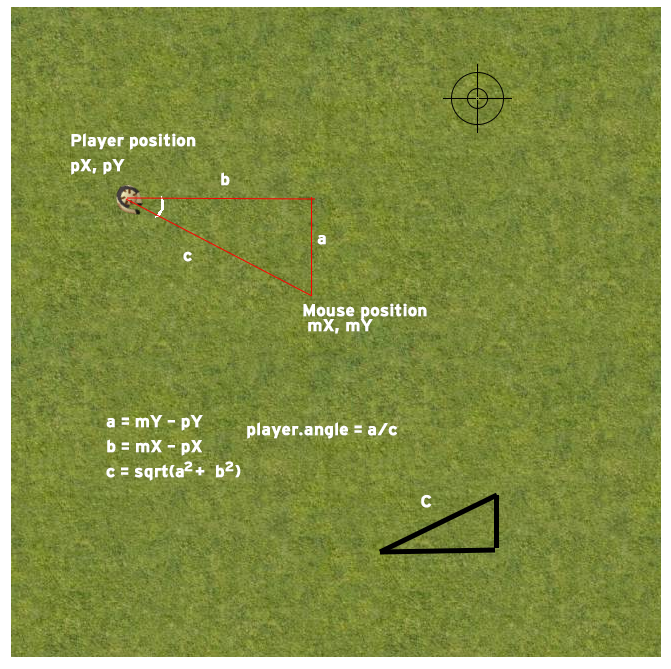
<style>
.page{position:relative;width:671px;height:669px}
.page>*{position:absolute;margin:0}
.t1{font:18px/25px "HittheRoad";color:#ffffff;font-weight:bold}
.t2{font:18px "HittheRoad";color:#ffffff;font-weight:bold}
.t3{font:14px "HittheRoad";color:#ffffff;font-weight:bold}
</style>
<div class="page">
<p class="t1" style="left:71px;top:133px;width:125px;height:42px">Player position<br>pX, pY</p>
<p class="t2" style="left:221px;top:172px;width:9px;height:14px">b</p>
<p class="t2" style="left:317px;top:235px;width:9px;height:10px">a</p>
<p class="t2" style="left:183px;top:251px;width:9px;height:11px">c</p>
<p class="t2" style="left:303px;top:303px;width:124px;height:17px">Mouse position</p>
<p class="t2" style="left:308px;top:319px;width:65px;height:15px">mX, mY</p>
<p class="t1" style="left:106px;top:415px;width:135px;height:66px">a = mY - pY<br>b = mX - pX<br>c = sqrt(a  +  b  )</p>
<p class="t2" style="left:247px;top:422px;width:150px;height:17px">player.angle = a/c</p>
<p class="t3" style="left:184px;top:461px;width:9px;height:11px">2</p>
<p class="t3" style="left:225px;top:461px;width:9px;height:11px">2</p>
<p class="t2" style="left:421px;top:495px;width:11px;height:13px">C</p>
</div>
